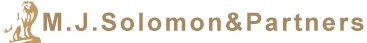
<style>
.page{position:relative;width:367px;height:43px;background:#ffffff}
.page>*{position:absolute;margin:0}
.t1{font:25px "Arial-BoldMT";letter-spacing:0.1em;color:#a68962}
</style>
<div class="page">
<p class="t1" style="left:43px;top:12px;width:321px;height:19px">M.J.Solomon&amp;Partners</p>
</div>
